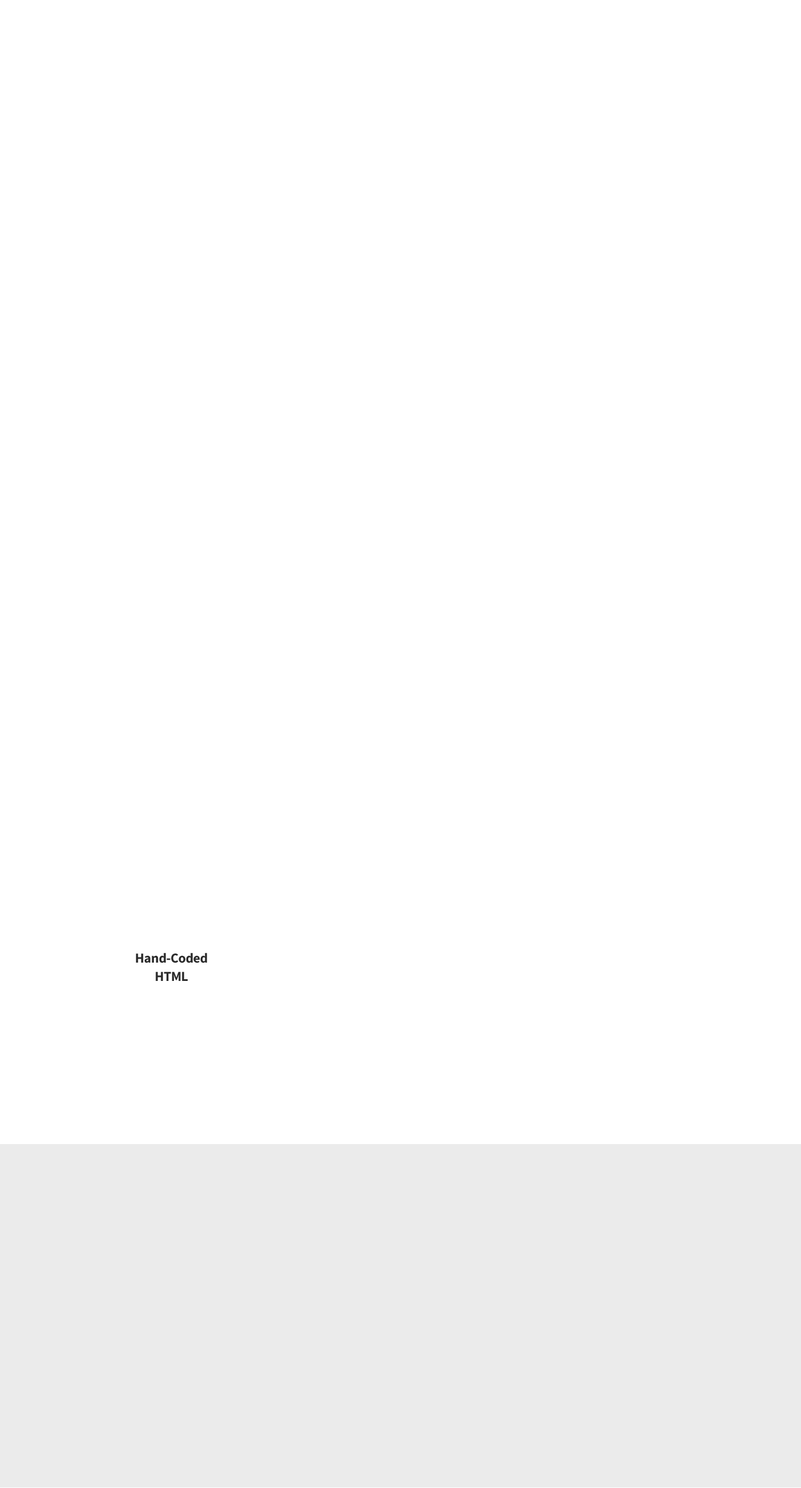
<style>
.page{position:relative;width:801px;height:1488px;background:#ffffff}
.page>*{position:absolute;margin:0}
.t1{font:13.7px/18.3px "SourceSansPro-Bold";letter-spacing:-0.02em;color:#2b2b2b}
</style>
<div class="page">
<p class="t1" style="left:136px;top:953px;width:71px;height:28px;text-align:center">Hand-Coded<br>HTML</p>
</div>
